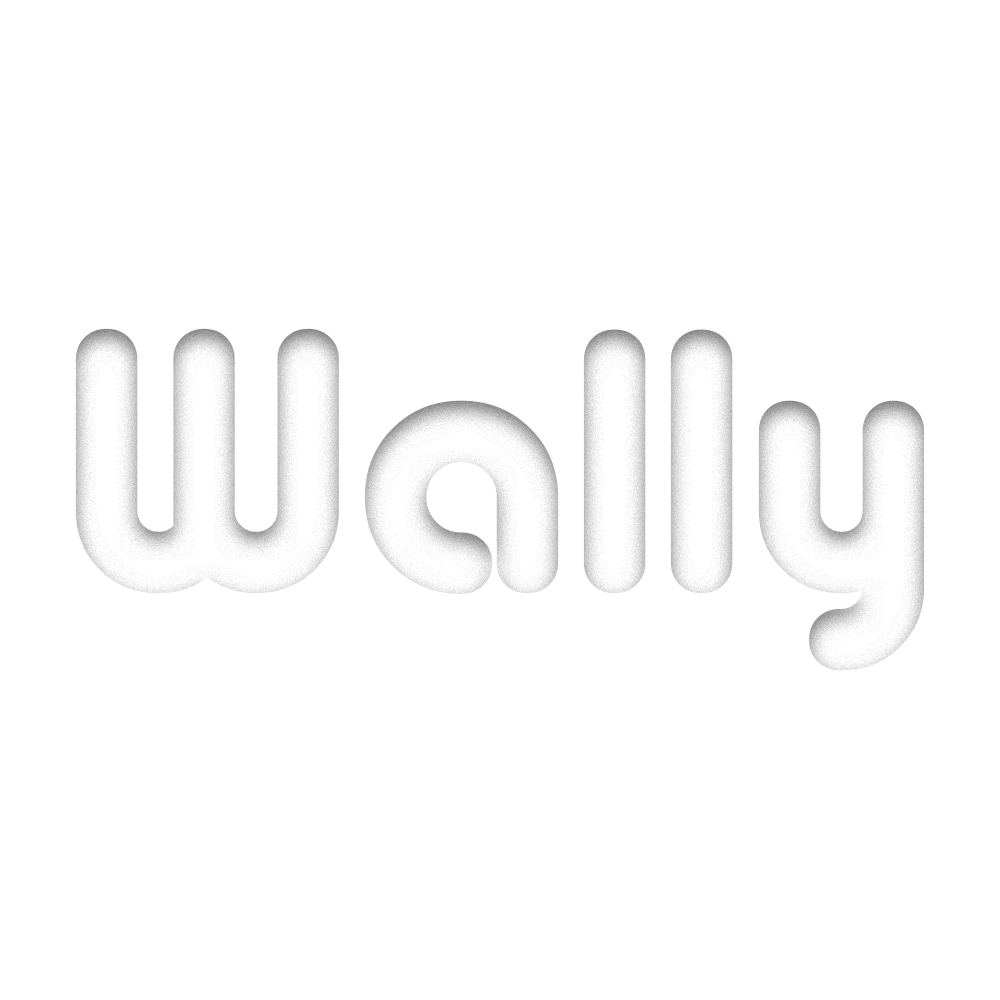
<style>
.page{position:relative;width:1000px;height:1000px;background:#ffffff}
.page>*{position:absolute;margin:0}
.t1{font:350.6px "AlbaMatter";letter-spacing:0.06em;color:#f6f6f6}
</style>
<div class="page">
<p class="t1" style="left:75px;top:328px;width:850px;height:343px">Wally</p>
</div>
